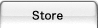
<style>
.page{position:relative;width:98px;height:28px}
.page>*{position:absolute;margin:0}
.t1{font:11px "HiraMaruPro-W4";color:#000000;font-weight:bold}
</style>
<div class="page">
<p class="t1" style="left:32px;top:10px;width:31px;height:10px">Store</p>
</div>
